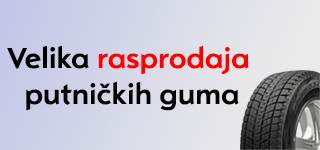
<style>
.page{position:relative;width:320px;height:150px}
.page>*{position:absolute;margin:0}
.t1{font:30px "OpelSans-Bold";color:#000000}
.t2{font:30px "OpelSans-Bold";color:#fe0000}
</style>
<div class="page">
<p class="t1" style="left:7px;top:45px;width:242px;height:66px;text-align:center">Velika <span class="t2">rasprodaja <br></span>putničkih guma</p>
</div>
